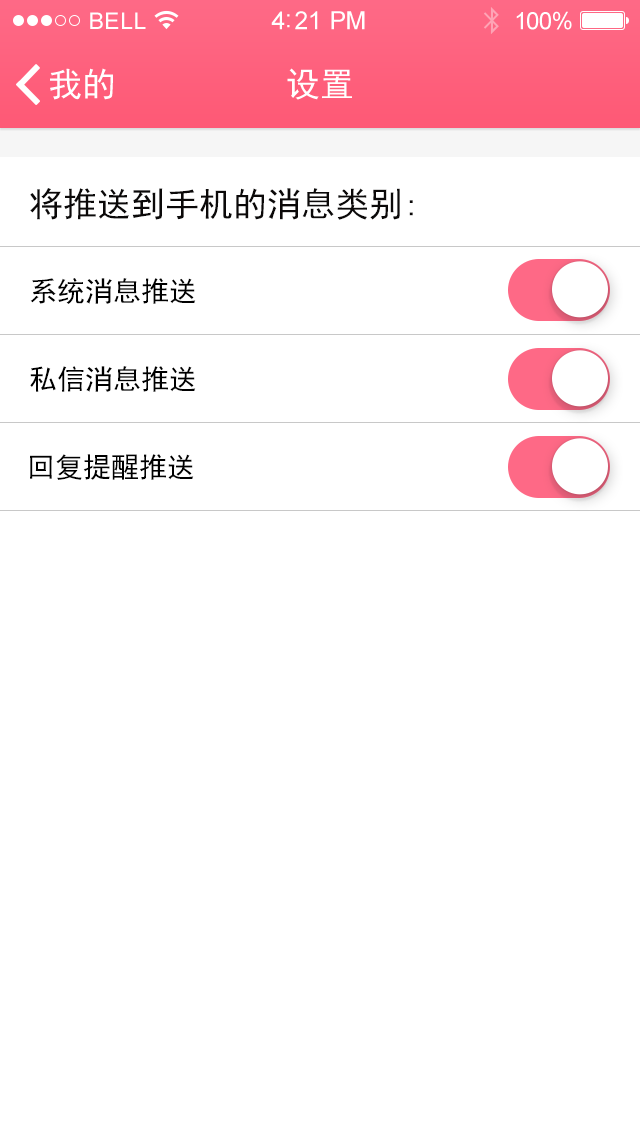
<style>
.page{position:relative;width:640px;height:1136px;background:#ffffff}
.page>*{position:absolute;margin:0}
.t1{font:34px "SimHei";color:#0b0909}
.t2{font:28px "SimHei";color:#000000}
</style>
<div class="page">
<p class="t1" style="left:30px;top:188px;width:383px;height:32px">将推送到手机的消息类别:</p>
<p class="t2" style="left:30px;top:278px;width:166px;height:26px">系统消息推送</p>
<p class="t2" style="left:30px;top:366px;width:166px;height:26px">私信消息推送</p>
<p class="t2" style="left:30px;top:454px;width:164px;height:26px">回复提醒推送</p>
</div>
